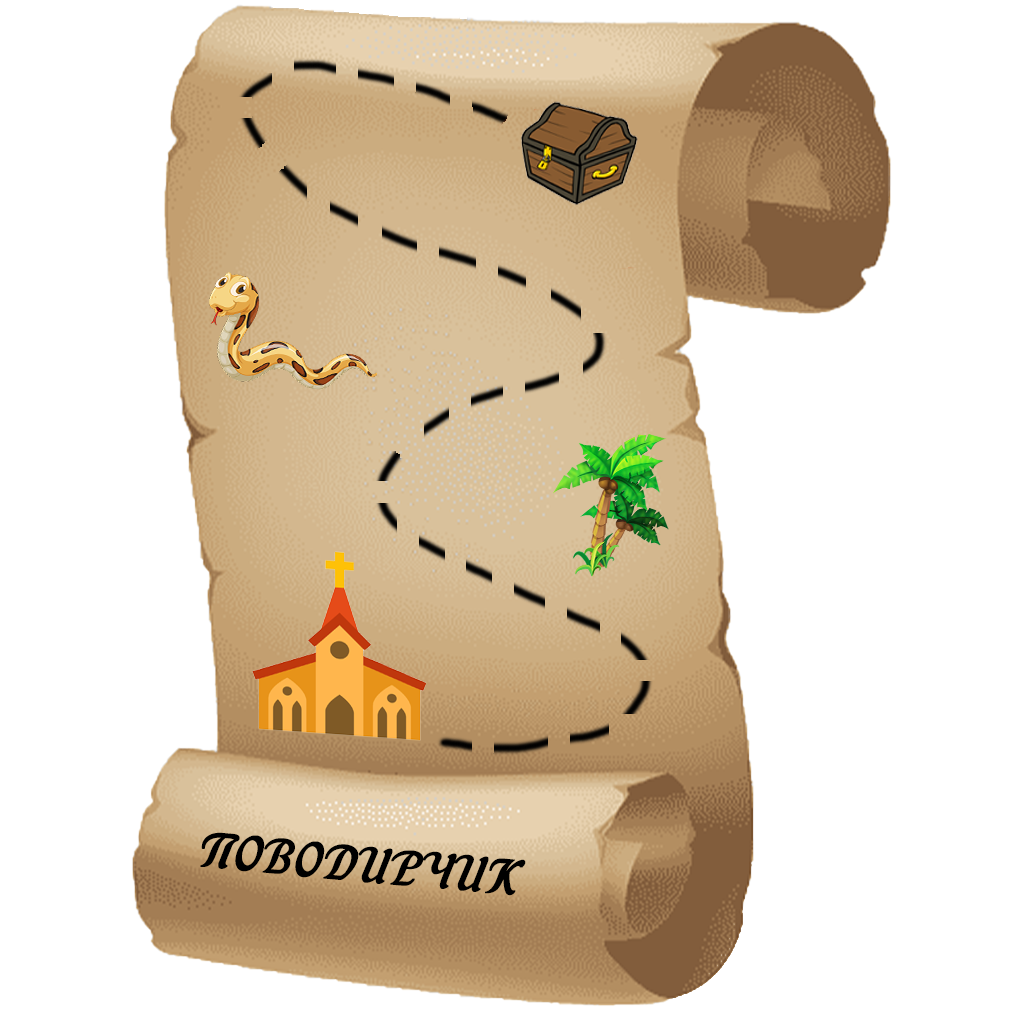
<style>
.page{position:relative;width:1024px;height:1024px;background:#ffffff}
.page>*{position:absolute;margin:0}
.t1{font:50px "BehrensKursivC";color:#000000;text-transform:uppercase;font-weight:bold}
</style>
<div class="page">
<p class="t1" style="left:200px;top:832px;width:326px;height:64px;rotate:5deg">Поводирчик</p>
</div>
